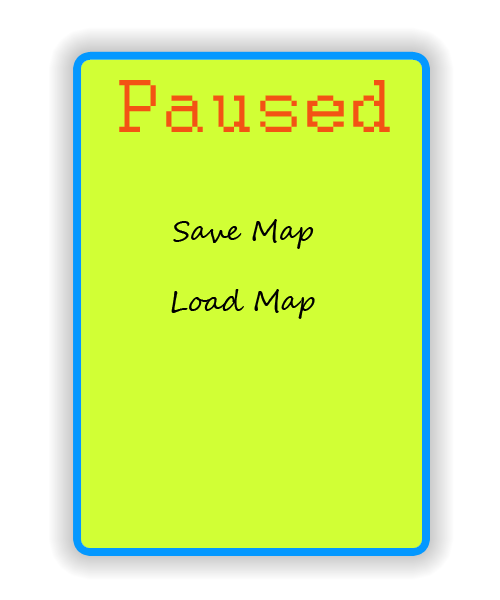
<style>
.page{position:relative;width:500px;height:600px;background:#d1ff35}
.page>*{position:absolute;margin:0}
.t1{font:83.3px "Courier";color:#f35314}
.t2{font:27.8px "SegoeScript";color:#000000}
</style>
<div class="page">
<p class="t1" style="left:119px;top:80px;width:271px;height:52px">Paused</p>
<p class="t2" style="left:173px;top:219px;width:141px;height:30px">Save Map</p>
<p class="t2" style="left:171px;top:289px;width:144px;height:30px">Load Map</p>
</div>
